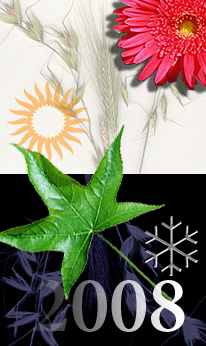
<style>
.page{position:relative;width:206px;height:346px}
.page>*{position:absolute;margin:0}
.t1{font:80px "MinionPro-Semibold"}
</style>
<div class="page">
<p class="t1" style="left:33px;top:280px;width:152px;height:52px">2008</p>
</div>
